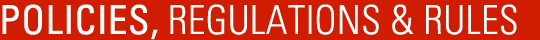
<style>
.page{position:relative;width:540px;height:40px;background:#d01c00}
.page>*{position:absolute;margin:0}
.t1{font:40px "Univers-CondensedLight";color:#ffffff;text-transform:uppercase}
.t2{font:40px "Univers-Condensed";color:#ffffff;text-transform:uppercase}
</style>
<div class="page">
<p class="t1" style="left:2px;top:4px;width:515px;height:36px"><span class="t2">Policies, </span>REGULATIONS &amp; RULES</p>
</div>
